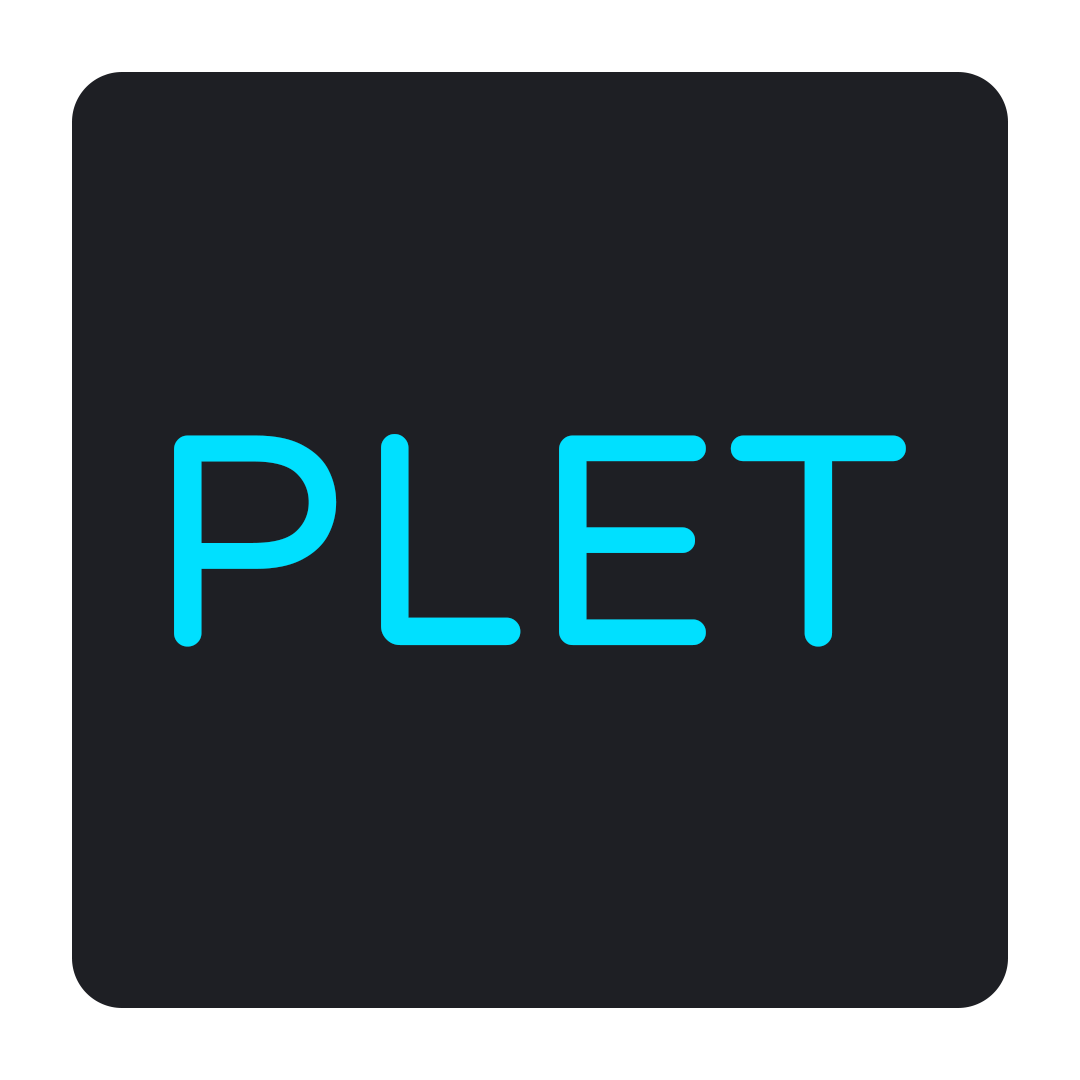
<style>
.page{position:relative;width:1080px;height:1080px;background:#1e1f24}
.page>*{position:absolute;margin:0}
.t1{font:300px "VarelaRound-Regular";letter-spacing:0.02em;color:#00e0ff}
</style>
<div class="page">
<p class="t1" style="left:174px;top:434px;width:732px;height:213px">PLET</p>
</div>
